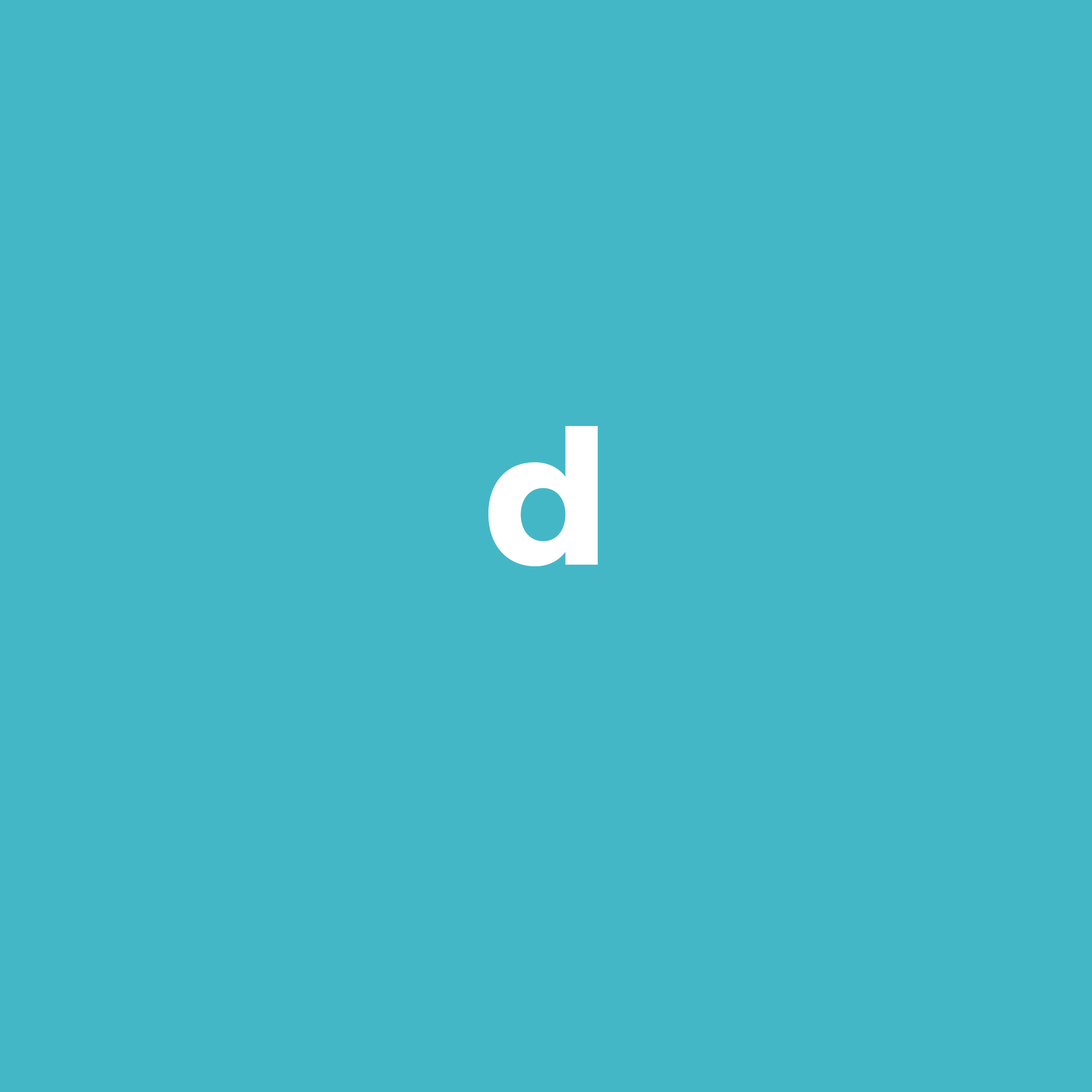
<style>
.page{position:relative;width:1092px;height:1092px;background:#44b7c7}
.page>*{position:absolute;margin:0}
.t1{font:186.6px "Montserrat-Bold";color:#ffffff}
</style>
<div class="page">
<p class="t1" style="left:488px;top:426px;width:110px;height:141px">d</p>
</div>
